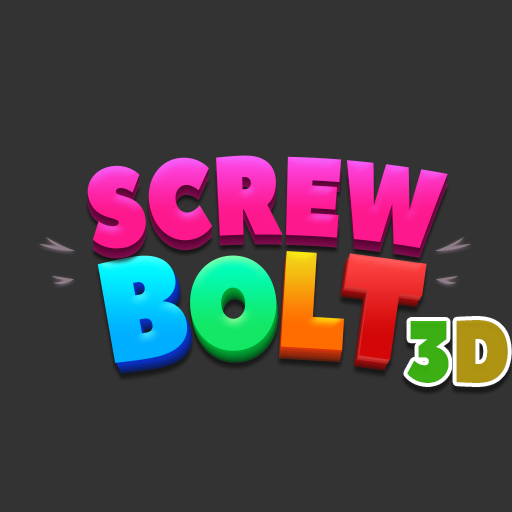
<style>
.page{position:relative;width:512px;height:512px;background:#333333}
.page>*{position:absolute;margin:0}
.t1{font:111.7px "PeaceSans";text-transform:uppercase;scale:0.77 1}
.t2{font:142.7px "PeaceSans";text-transform:uppercase;scale:0.85 1}
.t3{font:130.3px "PeaceSans";text-transform:uppercase;scale:0.85 1}
.t4{font:136.5px "PeaceSans";text-transform:uppercase;scale:0.85 1}
.t5{font:86.7px "PeaceSans";text-transform:uppercase;scale:0.85 1}
</style>
<div class="page">
<p class="t1" style="left:87px;top:155px;width:361px;height:94px">Screw</p>
<p class="t2" style="left:97px;top:255px;width:91px;height:108px;rotate:-10deg">B</p>
<p class="t3" style="left:190px;top:255px;width:87px;height:96px;rotate:-3deg">O</p>
<p class="t4" style="left:280px;top:251px;width:64px;height:100px;rotate:3deg">L</p>
<p class="t2" style="left:345px;top:253px;width:82px;height:107px;rotate:8deg">T</p>
<p class="t5" style="left:407px;top:320px;width:101px;height:63px">3D</p>
</div>
